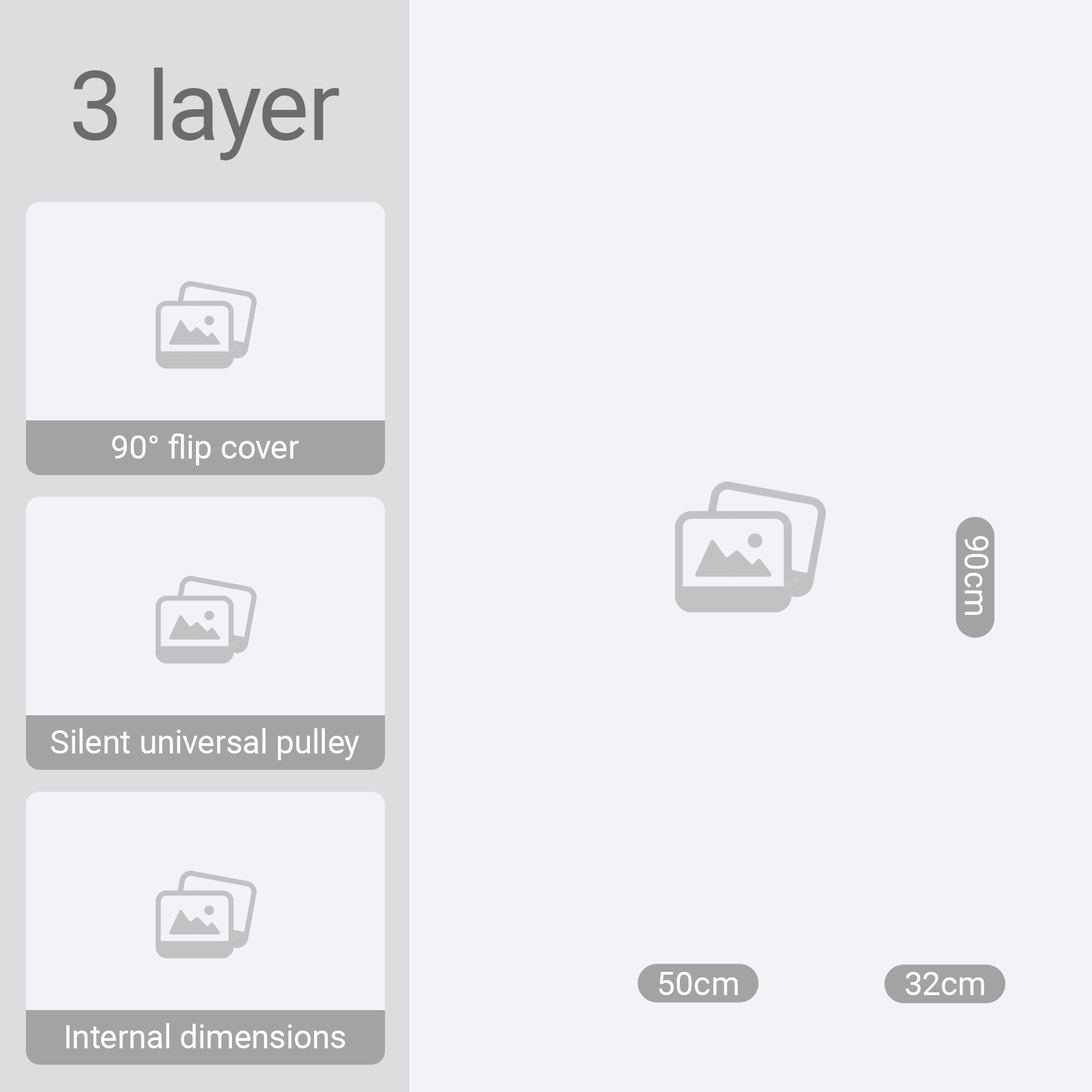
<style>
.page{position:relative;width:1092px;height:1092px;background:#f2f3f6}
.page>*{position:absolute;margin:0}
.t1{font:96.1px "Roboto-Regular";color:#6c6c6c}
.t2{font:32.8px "Roboto-Regular";color:#ffffff}
</style>
<div class="page">
<p class="t1" style="left:73px;top:68px;width:266px;height:92px">3 layer</p>
<p class="t2" style="left:112px;top:433px;width:187px;height:32px">90° flip cover</p>
<p class="t2" style="left:964px;top:536px;width:25px;height:79px;rotate:90deg">90cm</p>
<p class="t2" style="left:51px;top:728px;width:309px;height:32px">Silent universal pulley</p>
<p class="t2" style="left:659px;top:972px;width:79px;height:23px">50cm</p>
<p class="t2" style="left:906px;top:972px;width:78px;height:23px">32cm</p>
<p class="t2" style="left:66px;top:1023px;width:279px;height:25px">Internal dimensions</p>
</div>
